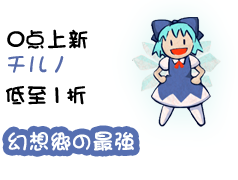
<style>
.page{position:relative;width:238px;height:180px;background:#ffffff}
.page>*{position:absolute;margin:0}
.t1{font:12.9px "DFMaruMoji-W9-WINP-RKSJ-H";color:#000000}
.t2{font:21.5px "DFMaruMoji-W9-WINP-RKSJ-H";color:#566baa}
.t3{font:21.5px "DFMaruMoji-W9-WINP-RKSJ-H";color:#feffff}
</style>
<div class="page">
<p class="t1" style="left:7px;top:29px;width:81px;height:20px">0点上新</p>
<p class="t2" style="left:8px;top:56px;width:56px;height:17px">チルノ</p>
<p class="t1" style="left:6px;top:86px;width:80px;height:19px">低至1折</p>
<p class="t3" style="left:8px;top:131px;width:126px;height:20px">幻想郷の最強</p>
</div>
